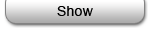
<style>
.page{position:relative;width:150px;height:30px}
.page>*{position:absolute;margin:0}
.t1{font:14.4px "ArialMT";color:#000000}
</style>
<div class="page">
<p class="t1" style="left:57px;top:6px;width:36px;height:10px">Show</p>
</div>
